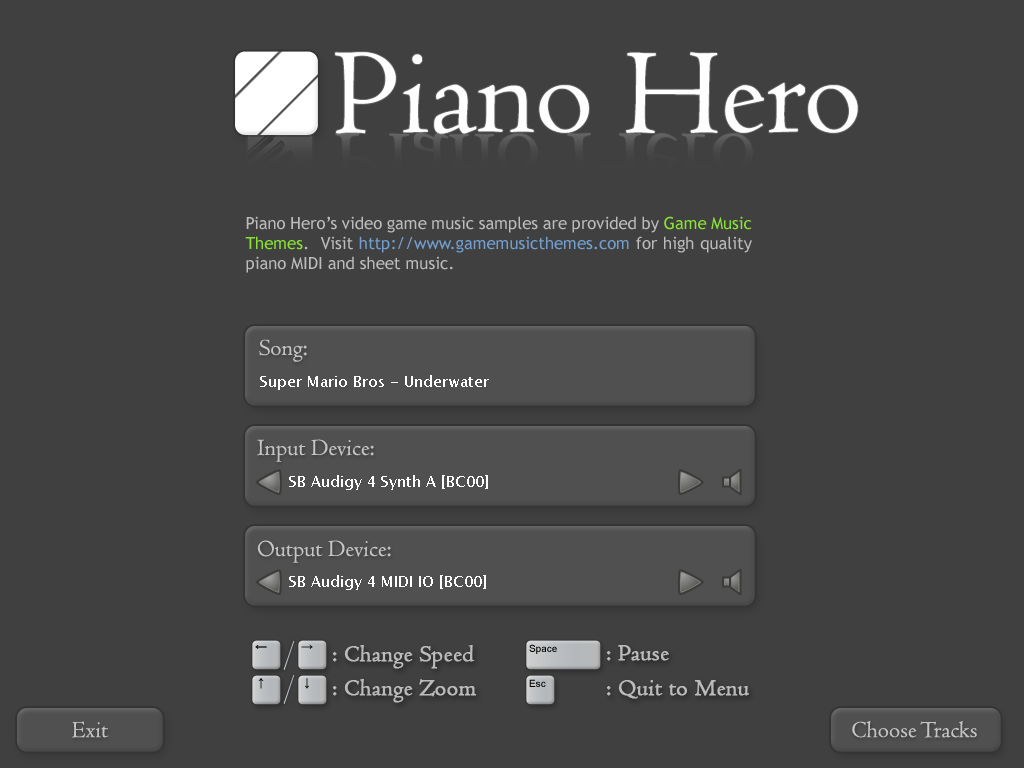
<style>
.page{position:relative;width:1024px;height:768px;background:#404040}
.page>*{position:absolute;margin:0}
.t1{font:125px "Centaur";color:#fefefe}
.t2{font:16.7px "TrebuchetMS";color:#bbbbbb}
.t3{font:16.7px "TrebuchetMS";color:#8ae234}
.t4{font:16.7px "TrebuchetMS";color:#729fcf}
.t5{font:24px "Centaur";color:#c4c4c4}
.t6{font:12px "ArialMT"}
.t7{font:24px "Centaur";color:#bbbbbb;font-weight:bold}
.t8{font:10px "ArialMT";color:#000000}
.t9{font:12px "ArialMT";color:#000000}
</style>
<div class="page">
<p class="t1" style="left:335px;top:52px;width:523px;height:82px">Piano Hero</p>
<p class="t2" style="left:245px;top:216px;width:507px;height:57px;text-align:justify">Piano Hero’s video game music samples are provided by <span class="t3">Game Music Themes</span>.  Visit <span class="t4">http://www.gamemusicthemes.com</span> for high quality piano MIDI and sheet music.</p>
<p class="t5" style="left:259px;top:339px;width:48px;height:23px">Song:</p>
<p class="t5" style="left:257px;top:439px;width:117px;height:23px">Input Device:</p>
<p class="t5" style="left:257px;top:540px;width:134px;height:23px">Output Device:</p>
<p class="t6" style="left:255px;top:645px;width:12px;height:4px">←</p>
<p class="t6" style="left:301px;top:644px;width:12px;height:5px">→</p>
<p class="t7" style="left:332px;top:645px;width:143px;height:24px">: Change Speed</p>
<p class="t8" style="left:529px;top:644px;width:28px;height:10px">Space</p>
<p class="t7" style="left:606px;top:645px;width:63px;height:16px">: Pause</p>
<p class="t9" style="left:258px;top:678px;width:6px;height:11px">↑</p>
<p class="t6" style="left:305px;top:678px;width:4px;height:11px">↓</p>
<p class="t7" style="left:332px;top:679px;width:145px;height:24px">: Change Zoom</p>
<p class="t8" style="left:529px;top:679px;width:17px;height:8px">Esc</p>
<p class="t7" style="left:606px;top:680px;width:143px;height:19px">: Quit to Menu</p>
<p class="t5" style="left:72px;top:721px;width:37px;height:17px">Exit</p>
<p class="t5" style="left:852px;top:720px;width:125px;height:18px">Choose Tracks</p>
</div>
